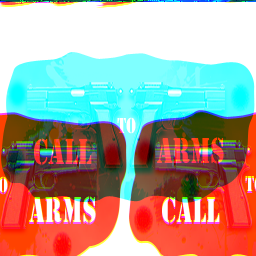
<style>
.page{position:relative;width:256px;height:256px;background:#ffffff}
.page>*{position:absolute;margin:0}
.t1{font:22.5px "Stencil";color:#ffffff;scale:0.68 1}
.t2{font:37.5px "Stencil";scale:0.68 1}
</style>
<div class="page">
<p class="t1" style="left:117px;top:115px;width:19px;height:17px">TO</p>
<p class="t2" style="left:34px;top:136px;width:58px;height:27px">CALL</p>
<p class="t2" style="left:157px;top:135px;width:67px;height:27px">ARMS</p>
</div>
